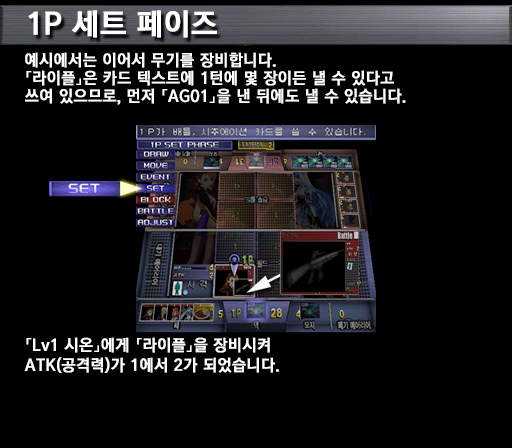
<style>
.page{position:relative;width:512px;height:448px;background:#000000}
.page>*{position:absolute;margin:0}
.t1{font:30px "KoreanGD15-R";color:#ffffff;font-weight:bold}
.t2{font:16px/18px "KoreanGD15-R";color:#ffffff;font-weight:bold}
.t3{font:16px/20px "KoreanGD15-R";color:#ffffff;font-weight:bold}
</style>
<div class="page">
<p class="t1" style="left:28px;top:10px;width:189px;height:28px">1P 세트 페이즈</p>
<p class="t2" style="left:25px;top:52px;width:381px;height:53px">예시에서는 이어서 무기를 장비합니다.<br>「라이플」은 카드 텍스트에 1턴에 몇 장이든 낼 수 있다고<br>쓰여 있으므로, 먼저 「AG01」을 낸 뒤에도 낼 수 있습니다.</p>
<p class="t3" style="left:24px;top:337px;width:255px;height:36px">「Lv1 시온」에게 「라이플」을 장비시켜<br>ATK(공격력)가 1에서 2가 되었습니다.</p>
</div>
